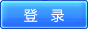
<style>
.page{position:relative;width:88px;height:29px}
.page>*{position:absolute;margin:0}
.t1{font:13.9px "MicrosoftYaHei";letter-spacing:0.975em;color:#ffffff}
</style>
<div class="page">
<p class="t1" style="left:24px;top:8px;width:40px;height:14px">登录</p>
</div>
